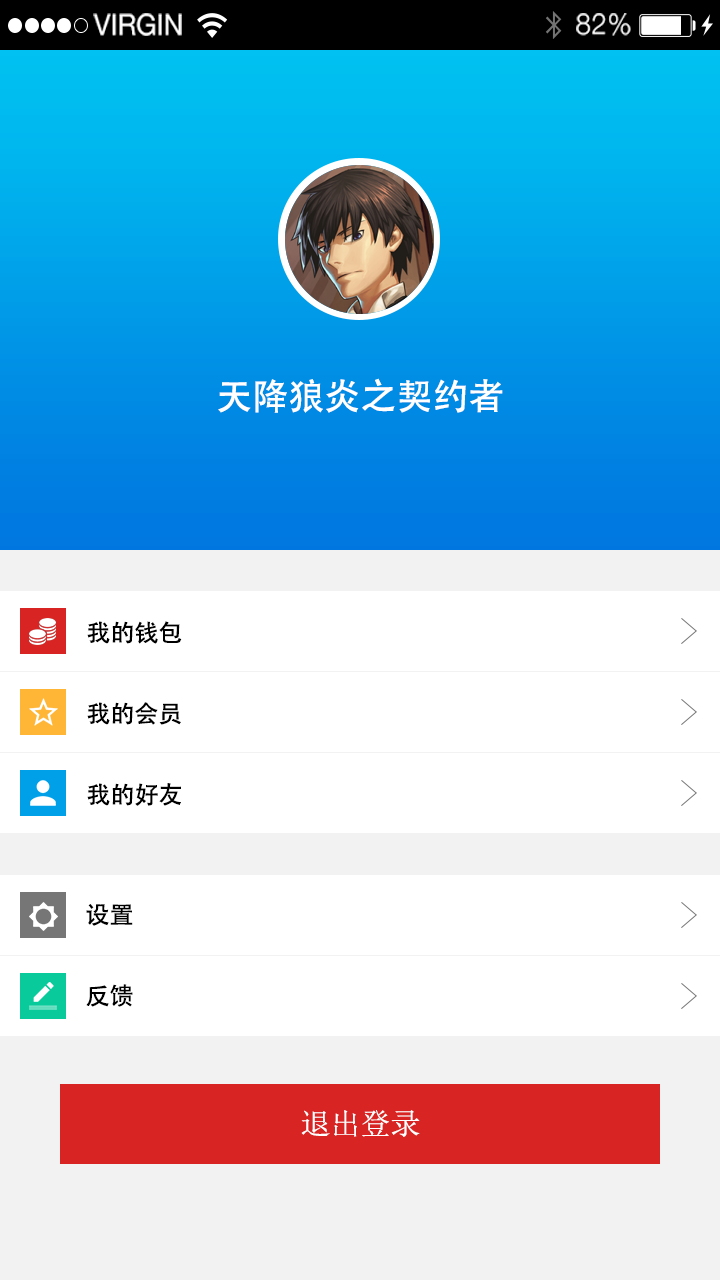
<style>
.page{position:relative;width:720px;height:1280px;background:#ffffff}
.page>*{position:absolute;margin:0}
.t1{font:29px "HelveticaNeue";color:#ffffff;text-transform:uppercase;scale:0.94 1}
.t2{font:29px "HelveticaNeue-Light";letter-spacing:0.025em;color:#ffffff;scale:0.94 1}
.t3{font:36px "AdobeHeitiStd-Regular";color:#ffffff}
.t4{font:24px "AdobeHeitiStd-Regular";color:#000000}
.t5{font:30px "SimSun";color:#ffffff}
</style>
<div class="page">
<p class="t1" style="left:93px;top:13px;width:89px;height:23px">Virgin</p>
<p class="t2" style="left:576px;top:13px;width:55px;height:23px">82%</p>
<p class="t3" style="left:218px;top:378px;width:285px;height:35px">天降狼炎之契约者</p>
<p class="t4" style="left:87px;top:621px;width:95px;height:23px">我的钱包</p>
<p class="t4" style="left:87px;top:702px;width:94px;height:23px">我的会员</p>
<p class="t4" style="left:87px;top:783px;width:94px;height:23px">我的好友</p>
<p class="t4" style="left:86px;top:904px;width:47px;height:22px">设置</p>
<p class="t4" style="left:86px;top:984px;width:47px;height:23px">反馈</p>
<p class="t5" style="left:301px;top:1110px;width:119px;height:27px">退出登录</p>
</div>
